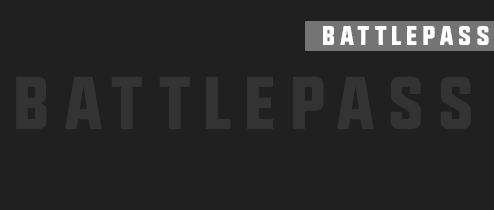
<style>
.page{position:relative;width:494px;height:210px;background:#202020}
.page>*{position:absolute;margin:0}
.t1{font:27px "UpboltersNew";letter-spacing:0.18em;color:#ffffff;text-transform:uppercase}
.t2{font:74.4px "UpboltersNew";letter-spacing:0.18em;color:#333333;text-transform:uppercase}
</style>
<div class="page">
<p class="t1" style="left:323px;top:26px;width:166px;height:19px">BattlePass</p>
<p class="t2" style="left:16px;top:76px;width:455px;height:53px">BattlePass</p>
</div>
